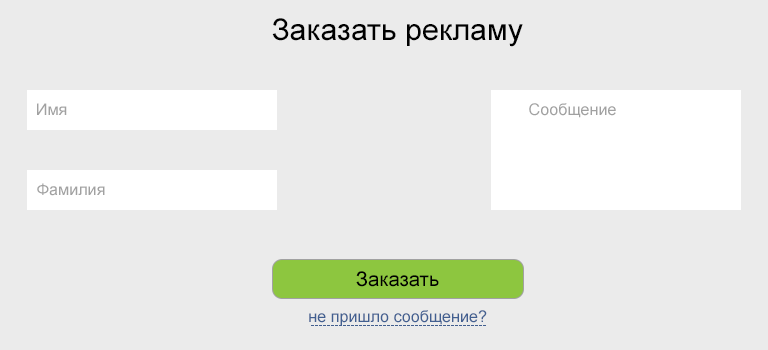
<style>
.page{position:relative;width:768px;height:350px;background:#ebebeb}
.page>*{position:absolute;margin:0}
.t1{font:30px "ArialMT";color:#000000}
.t2{font:16px "ArialMT";color:#a1a1a1}
.t3{font:20px "ArialMT";color:#000000}
.t4{font:16px "ArialMT";color:#425f90}
</style>
<div class="page">
<p class="t1" style="left:272px;top:18px;width:251px;height:29px">Заказать рекламу</p>
<p class="t2" style="left:37px;top:103px;width:30px;height:12px">Имя</p>
<p class="t2" style="left:529px;top:103px;width:87px;height:15px">Сообщение</p>
<p class="t2" style="left:37px;top:183px;width:68px;height:13px">Фамилия</p>
<p class="t3" style="left:356px;top:271px;width:83px;height:16px">Заказать</p>
<p class="t4" style="left:309px;top:310px;width:178px;height:16px">не пришло сообщение?</p>
</div>
